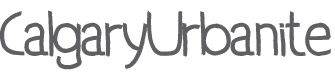
<style>
.page{position:relative;width:335px;height:78px;background:#ffffff}
.page>*{position:absolute;margin:0}
.t1{font:72px "QuixeramobimNormal";color:#5f5f64}
</style>
<div class="page">
<p class="t1" style="left:0px;top:10px;width:331px;height:60px">CalgaryUrbanite</p>
</div>
